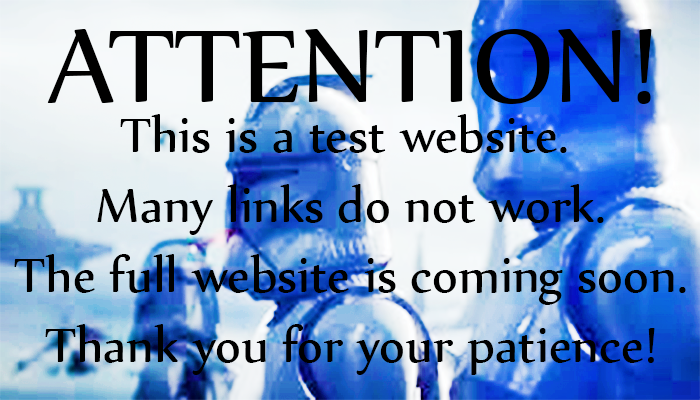
<style>
.page{position:relative;width:700px;height:400px}
.page>*{position:absolute;margin:0}
.t1{font:125px "Nyala-Regular";color:#000000}
.t2{font:58.3px "Nyala-Regular";color:#000000}
</style>
<div class="page">
<p class="t1" style="left:47px;top:29px;width:605px;height:75px">ATTENTION!</p>
<p class="t2" style="left:14px;top:114px;width:672px;height:261px;text-align:center">This is a test website. <br>Many links do not work.<br>The full website is coming soon.<br>Thank you for your patience!</p>
</div>
